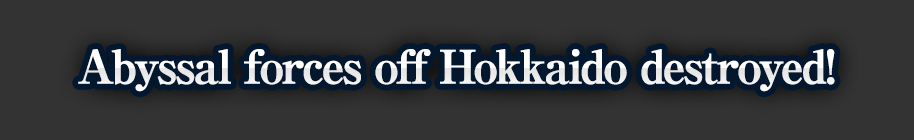
<style>
.page{position:relative;width:914px;height:140px;background:#333333}
.page>*{position:absolute;margin:0}
.t1{font:46px "RyuminPro-ExBold";letter-spacing:-0.08em;color:#ffffff;font-weight:bold}
</style>
<div class="page">
<p class="t1" style="left:78px;top:49px;width:757px;height:43px">Abyssal forces off Hokkaido destroyed!</p>
</div>
